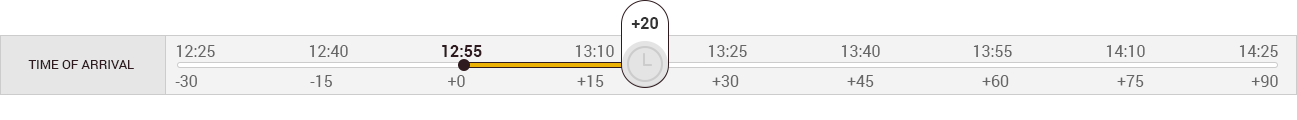
<style>
.page{position:relative;width:1297px;height:120px;background:#ffffff}
.page>*{position:absolute;margin:0}
.t1{font:16px "Roboto-Bold";color:#333333}
.t2{font:16px "Roboto-Regular";color:#666666}
.t3{font:16px "Roboto-Bold";color:#2f1b1f}
.t4{font:13px "Roboto-Regular";color:#2f1b1f;text-transform:uppercase}
</style>
<div class="page">
<p class="t1" style="left:631px;top:17px;width:27px;height:12px">+20</p>
<p class="t2" style="left:176px;top:45px;width:39px;height:12px">12:25</p>
<p class="t2" style="left:309px;top:45px;width:39px;height:12px">12:40</p>
<p class="t3" style="left:442px;top:45px;width:40px;height:12px">12:55</p>
<p class="t2" style="left:575px;top:45px;width:39px;height:12px">13:10</p>
<p class="t2" style="left:708px;top:45px;width:39px;height:12px">13:25</p>
<p class="t2" style="left:841px;top:45px;width:39px;height:12px">13:40</p>
<p class="t2" style="left:973px;top:45px;width:39px;height:12px">13:55</p>
<p class="t2" style="left:1106px;top:45px;width:39px;height:12px">14:10</p>
<p class="t2" style="left:1239px;top:45px;width:39px;height:12px">14:25</p>
<p class="t4" style="left:28px;top:60px;width:106px;height:9px">Time of Arrival</p>
<p class="t2" style="left:175px;top:75px;width:22px;height:12px">-30</p>
<p class="t2" style="left:310px;top:75px;width:22px;height:12px">-15</p>
<p class="t2" style="left:448px;top:75px;width:17px;height:12px">+0</p>
<p class="t2" style="left:577px;top:75px;width:27px;height:12px">+15</p>
<p class="t2" style="left:712px;top:75px;width:27px;height:12px">+30</p>
<p class="t2" style="left:847px;top:75px;width:27px;height:12px">+45</p>
<p class="t2" style="left:982px;top:75px;width:27px;height:12px">+60</p>
<p class="t2" style="left:1117px;top:75px;width:27px;height:12px">+75</p>
<p class="t2" style="left:1251px;top:75px;width:27px;height:12px">+90</p>
</div>
